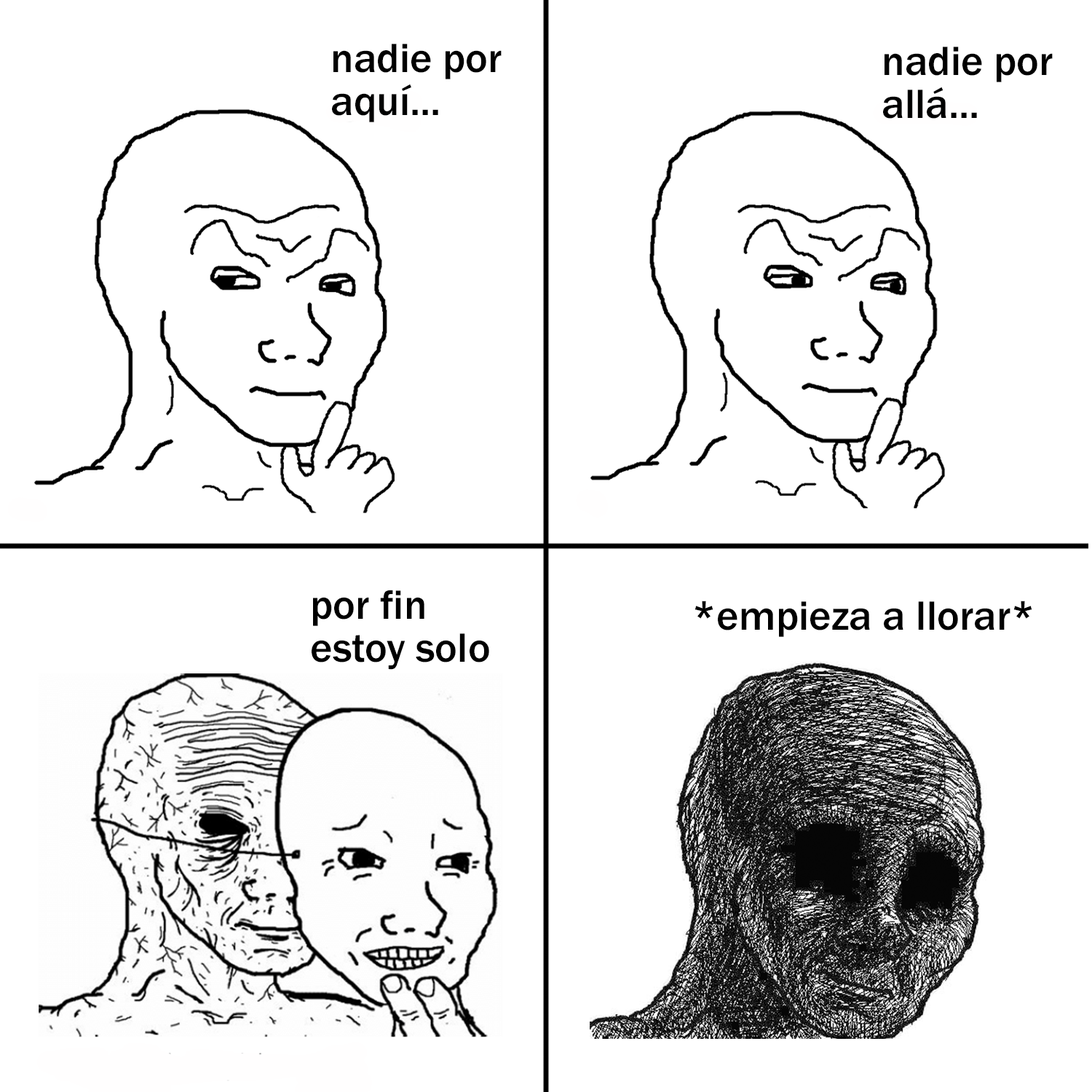
<style>
.page{position:relative;width:1092px;height:1092px;background:#ffffff}
.page>*{position:absolute;margin:0}
.t1{font:42.5px "FranklinGothic-Medium";color:#000000}
</style>
<div class="page">
<p class="t1" style="left:332px;top:44px;width:170px;height:78px">nadie por<br>aquí...</p>
<p class="t1" style="left:883px;top:47px;width:170px;height:72px">nadie por<br>allá...</p>
<p class="t1" style="left:312px;top:590px;width:177px;height:80px">por fin<br>estoy solo</p>
<p class="t1" style="left:695px;top:601px;width:337px;height:36px">*empieza a llorar*</p>
</div>
